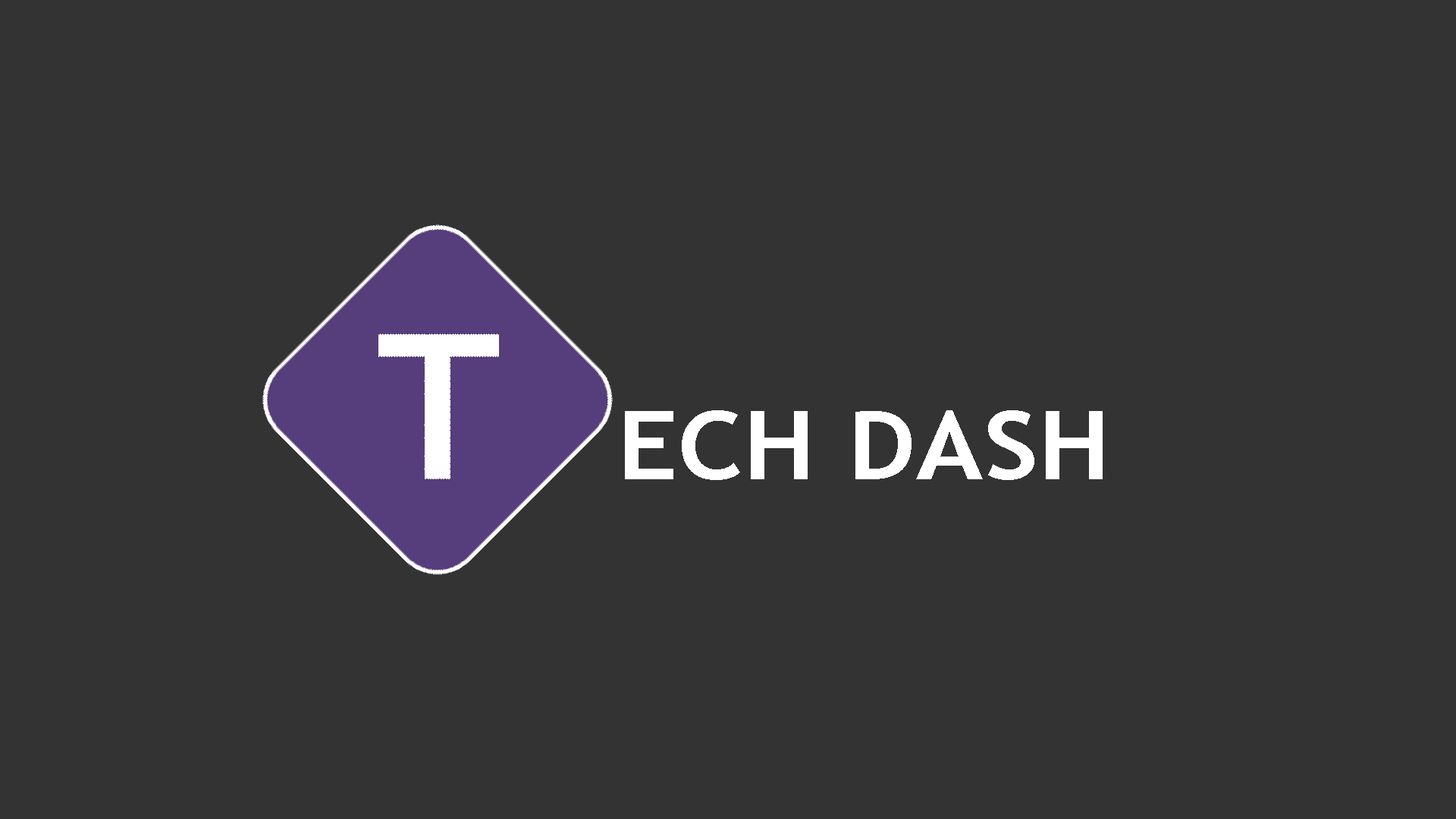
<style>
.page{position:relative;width:1456px;height:819px;background:#333333}
.page>*{position:absolute;margin:0}
.t1{font:95.5px "TrebuchetMS-Bold";color:#ffffff;scale:1.11 1}
</style>
<div class="page">
<p class="t1" style="left:625px;top:410px;width:478px;height:70px">ECH DASH</p>
</div>
